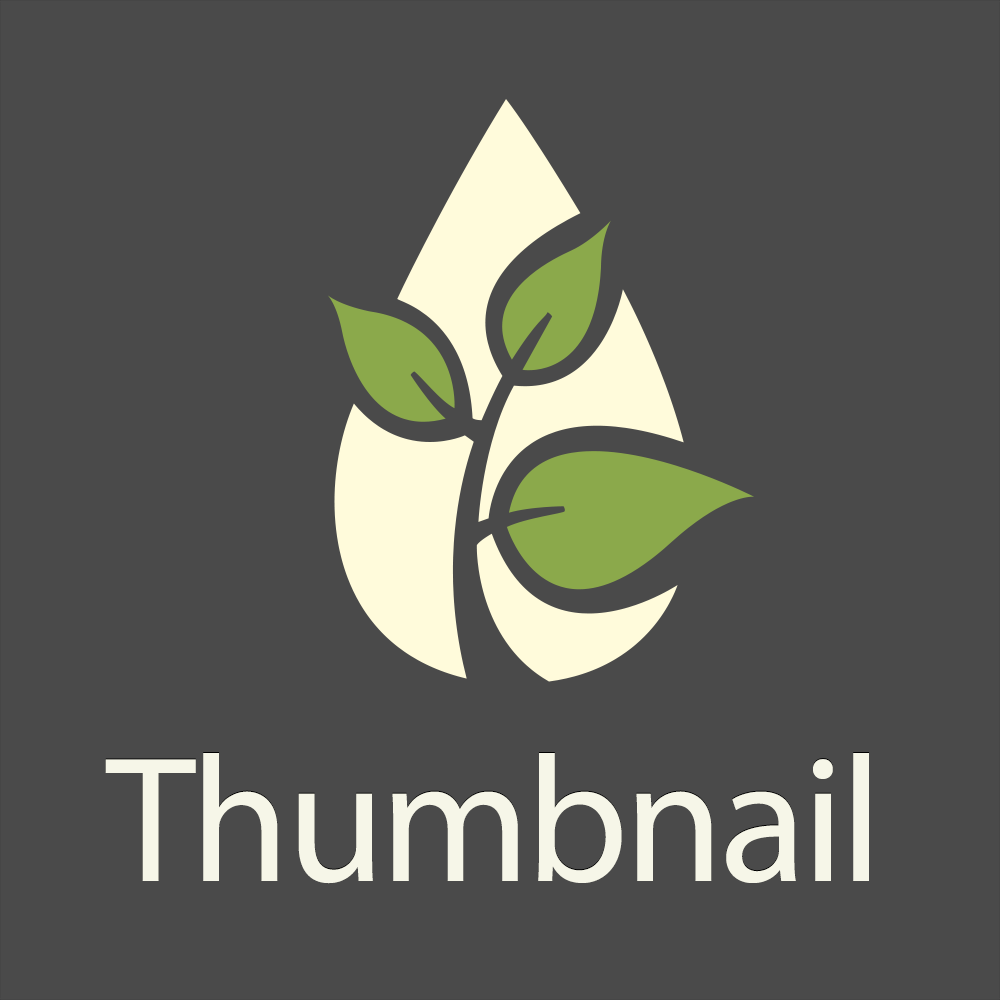
<style>
.page{position:relative;width:1000px;height:1000px;background:#4a4a4a}
.page>*{position:absolute;margin:0}
.t1{font:180.3px "MyriadPro-Regular";letter-spacing:-0.025em;color:#f6f6e8}
</style>
<div class="page">
<p class="t1" style="left:105px;top:753px;width:764px;height:131px">Thumbnail</p>
</div>
